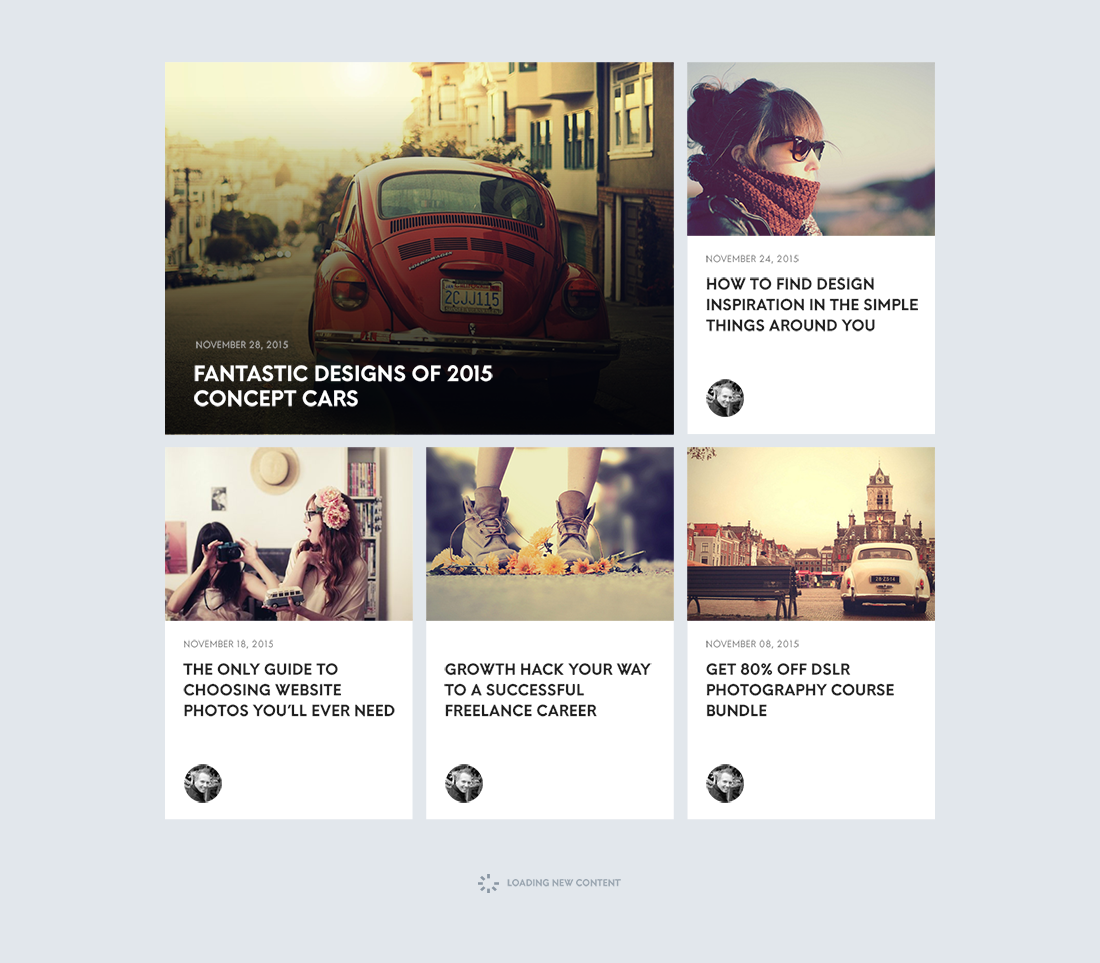
<style>
.page{position:relative;width:1100px;height:963px;background:#e2e7ec}
.page>*{position:absolute;margin:0}
.t1{font:8.9px "HansKendrick-Medium";letter-spacing:0.025em;color:#818181;text-transform:uppercase}
.t2{font:15.1px/20.6px "HansKendrick-Heavy";letter-spacing:0.025em;color:#1d1d1d;text-transform:uppercase}
.t3{font:8.9px "HansKendrick-Medium";letter-spacing:0.025em;color:#adaca9;text-transform:uppercase}
.t4{font:20.6px/24.8px "HansKendrick-Heavy";letter-spacing:0.025em;color:#ffffff;text-transform:uppercase}
.t5{font:8.9px "HansKendrick-Heavy";letter-spacing:0.025em;color:#99a5b0;text-transform:uppercase}
</style>
<div class="page">
<p class="t1" style="left:706px;top:254px;width:93px;height:10px">November 24, 2015</p>
<p class="t2" style="left:706px;top:277px;width:212px;height:55px">How To Find Design <br>Inspiration In The Simple <br>Things Around You</p>
<p class="t3" style="left:196px;top:340px;width:92px;height:10px">November 28, 2015</p>
<p class="t4" style="left:194px;top:365px;width:299px;height:42px">Fantastic Designs Of 2015<br>Concept Cars</p>
<p class="t1" style="left:184px;top:639px;width:89px;height:10px">November 18, 2015</p>
<p class="t1" style="left:706px;top:639px;width:93px;height:10px">November 08, 2015</p>
<p class="t2" style="left:183px;top:663px;width:212px;height:54px">The Only Guide To <br>Choosing Website <br>Photos You’ll Ever Need</p>
<p class="t2" style="left:444px;top:663px;width:208px;height:54px">Growth Hack Your Way <br>to a Successful <br>Freelance Career</p>
<p class="t2" style="left:706px;top:663px;width:188px;height:54px">Get 80% Off DSLR <br>Photography Course <br>Bundle</p>
<p class="t5" style="left:507px;top:879px;width:114px;height:8px">LOADING NEW CONTENT</p>
</div>
